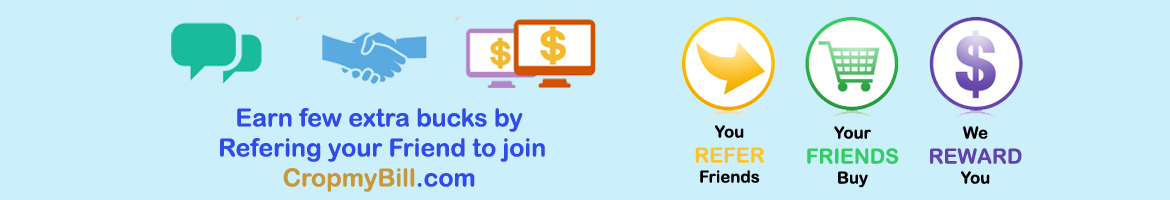
<style>
.page{position:relative;width:1170px;height:200px;background:#cbeffb}
.page>*{position:absolute;margin:0}
.t1{font:25px "ArialRoundedMTBold";color:#314be8}
.t2{font:25px "ArialRoundedMTBold";color:#c79739}
.t3{font:16.7px "ArialRoundedMTBold";color:#000000}
.t4{font:20.8px "ArialRoundedMTBold";color:#fdc432}
.t5{font:20.8px "ArialRoundedMTBold";color:#32ce63}
.t6{font:20.8px "ArialRoundedMTBold";color:#6242ab}
.t7{font:16.7px "ArialRoundedMTBold";color:#010101}
</style>
<div class="page">
<p class="t1" style="left:220px;top:108px;width:325px;height:84px;text-align:center">Earn few extra bucks by <br> Refering your Friend to join <span class="t2">CropmyBill</span>.com</p>
<p class="t3" style="left:695px;top:125px;width:69px;height:58px;text-align:center">You<br><span class="t4">REFER<br></span>Friends</p>
<p class="t5" style="left:807px;top:126px;width:92px;height:62px;text-align:center"><span class="t3">Your<br></span>FRIENDS<br><span class="t3">Buy</span></p>
<p class="t6" style="left:930px;top:126px;width:92px;height:58px;text-align:center"><span class="t3">We<br></span>REWARD<br><span class="t7">You</span></p>
</div>
